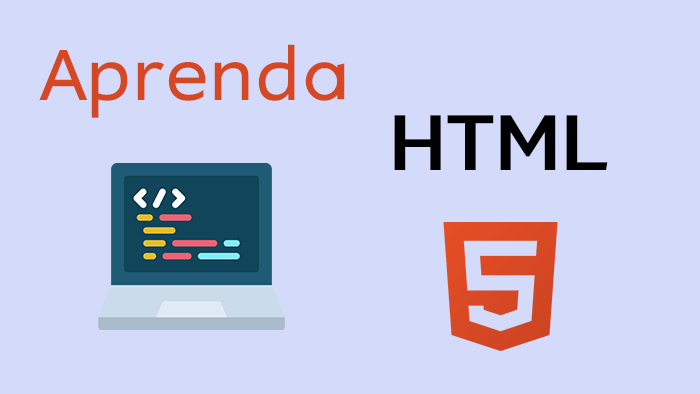
<style>
.page{position:relative;width:700px;height:394px;background:#d3dafa}
.page>*{position:absolute;margin:0}
.t1{font:75px "NanotechLLC";letter-spacing:0.025em;color:#d54823}
.t2{font:75px "WithoutSans-SemiBold";letter-spacing:0.025em;color:#000000}
</style>
<div class="page">
<p class="t1" style="left:39px;top:44px;width:306px;height:74px">Aprenda</p>
<p class="t2" style="left:394px;top:115px;width:214px;height:55px">HTML</p>
</div>
